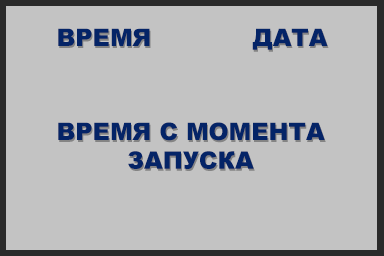
<style>
.page{position:relative;width:384px;height:256px;background:#c3c3c3}
.page>*{position:absolute;margin:0}
.t1{font:24px "Arial-Black";color:#042467}
</style>
<div class="page">
<p class="t1" style="left:58px;top:28px;width:92px;height:18px">ВРЕМЯ</p>
<p class="t1" style="left:252px;top:28px;width:76px;height:22px">ДАТА</p>
<p class="t1" style="left:58px;top:122px;width:267px;height:47px;text-align:center">ВРЕМЯ С МОМЕНТА<br>ЗАПУСКА</p>
</div>
